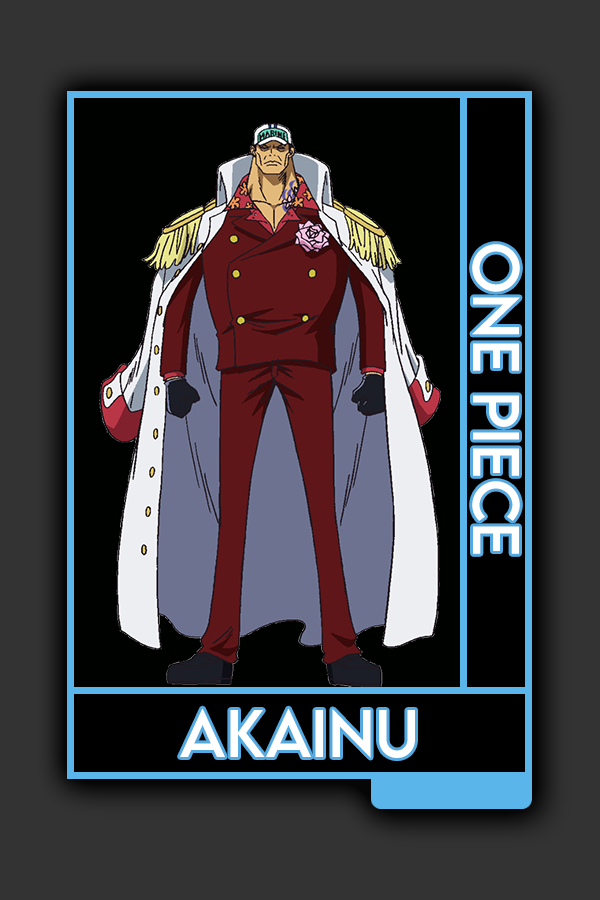
<style>
.page{position:relative;width:600px;height:900px;background:#333333}
.page>*{position:absolute;margin:0}
.t1{font:58.4px "LEMONMILK-Regular";color:#ffffff}
.t2{font:60.3px "LEMONMILK-Regular";color:#ffffff}
</style>
<div class="page">
<p class="t1" style="left:472px;top:244px;width:48px;height:310px;rotate:90deg">One Piece</p>
<p class="t2" style="left:180px;top:708px;width:235px;height:50px">Akainu</p>
</div>
